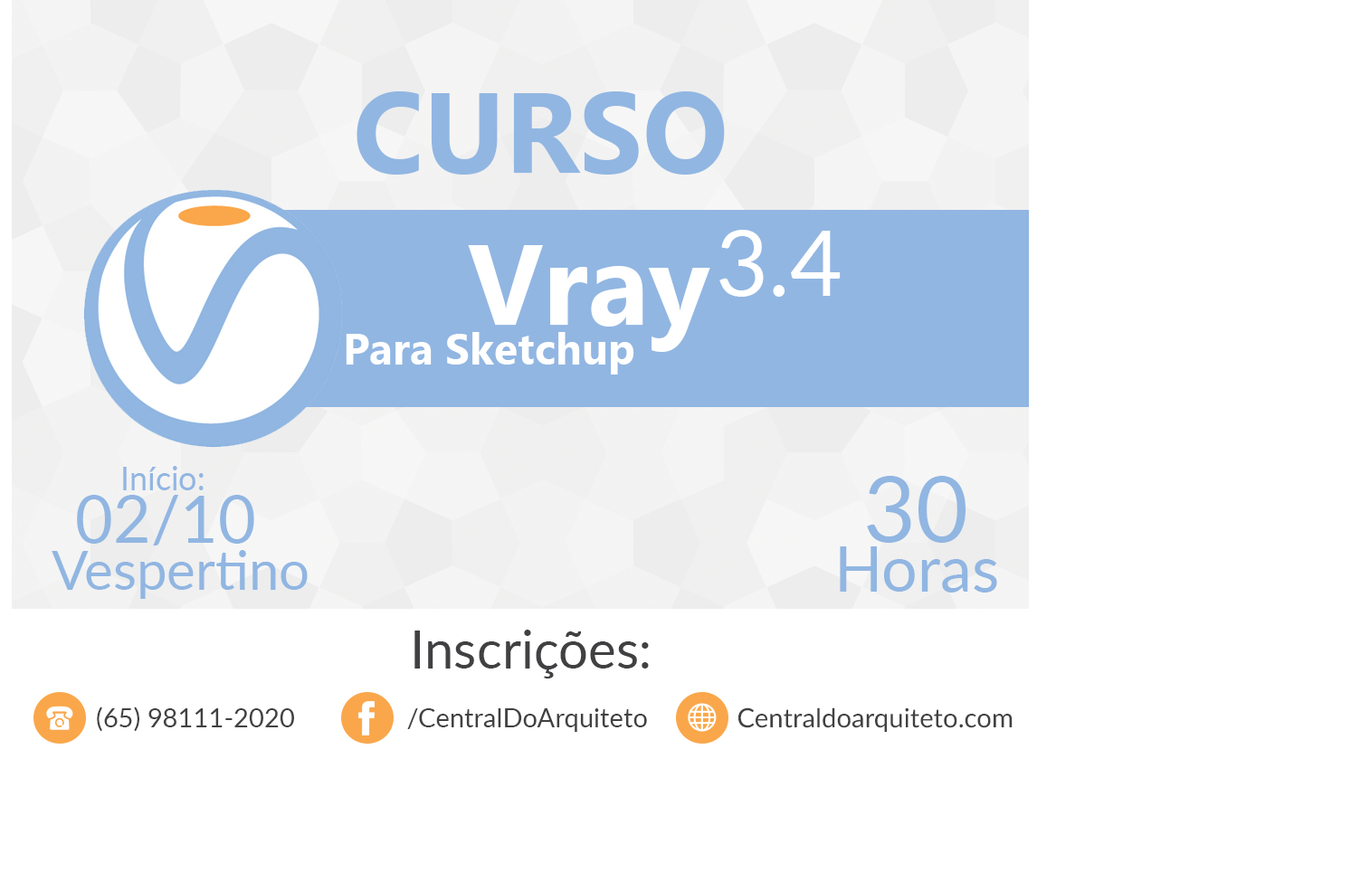
<style>
.page{position:relative;width:1351px;height:882px;background:#ffffff}
.page>*{position:absolute;margin:0}
.t1{font:113.1px "LaoUI-Bold";color:#91b6e2}
.t2{font:90.5px "Lato-Regular";color:#ffffff}
.t3{font:113.1px "LaoUI-Bold";color:#ffffff}
.t4{font:43.4px "LaoUI-Bold";color:#ffffff}
.t5{font:32.6px "Lato-Regular";color:#91b6e2}
.t6{font:90.5px "Lato-Regular";color:#91b6e2}
.t7{font:65.2px "Lato-Regular";color:#91b6e2}
.t8{font:54.3px "Lato-Regular";color:#91b6e2}
.t9{font:63.4px "Lato-Regular";color:#91b6e2}
.t10{font:52.8px "Lato-Regular";color:#414042}
.t11{font:26.4px "Lato-Regular";color:#414042}
</style>
<div class="page">
<p class="t1" style="left:357px;top:91px;width:368px;height:84px">CURSO</p>
<p class="t2" style="left:720px;top:230px;width:121px;height:67px">3.4</p>
<p class="t3" style="left:468px;top:245px;width:242px;height:107px">Vray</p>
<p class="t4" style="left:346px;top:332px;width:288px;height:43px">Para Sketchup</p>
<p class="t5" style="left:123px;top:466px;width:81px;height:25px">Início:</p>
<p class="t6" style="left:867px;top:476px;width:99px;height:67px">30</p>
<p class="t7" style="left:77px;top:495px;width:177px;height:51px">02/10</p>
<p class="t8" style="left:52px;top:550px;width:256px;height:49px">Vespertino</p>
<p class="t9" style="left:840px;top:547px;width:157px;height:46px">Horas</p>
<p class="t10" style="left:415px;top:630px;width:234px;height:49px">Inscrições:</p>
<p class="t11" style="left:97px;top:707px;width:197px;height:25px">(65) 98111-2020</p>
<p class="t11" style="left:407px;top:709px;width:240px;height:23px">/CentralDoArquiteto</p>
<p class="t11" style="left:739px;top:708px;width:274px;height:24px">Centraldoarquiteto.com</p>
</div>
